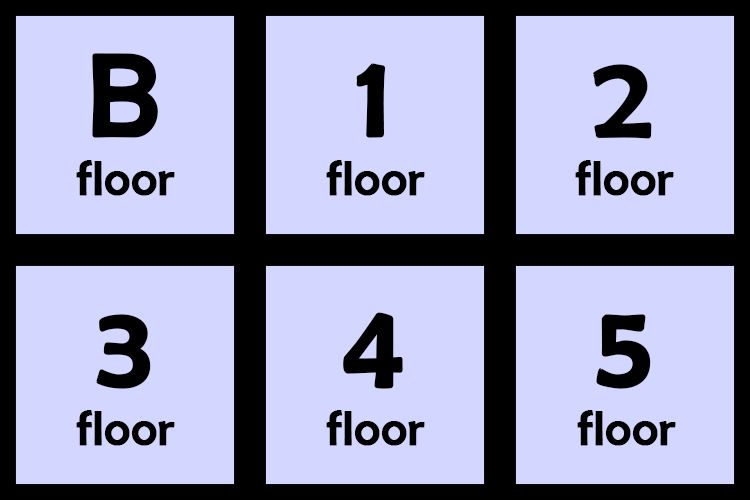
<style>
.page{position:relative;width:750px;height:500px;background:#d3d6ff}
.page>*{position:absolute;margin:0}
.t1{font:118px "BerlinSansFB-Reg";color:#000000;font-weight:bold}
.t2{font:49px "BerlinSansFB-Reg";color:#000000;font-weight:bold}
</style>
<div class="page">
<p class="t1" style="left:92px;top:53px;width:66px;height:85px">B</p>
<p class="t1" style="left:356px;top:63px;width:30px;height:75px">1</p>
<p class="t1" style="left:593px;top:64px;width:59px;height:75px">2</p>
<p class="t2" style="left:76px;top:160px;width:99px;height:36px">floor</p>
<p class="t2" style="left:326px;top:160px;width:99px;height:36px">floor</p>
<p class="t2" style="left:575px;top:160px;width:99px;height:36px">floor</p>
<p class="t1" style="left:96px;top:314px;width:55px;height:75px">3</p>
<p class="t1" style="left:343px;top:312px;width:60px;height:77px">4</p>
<p class="t1" style="left:596px;top:314px;width:55px;height:75px">5</p>
<p class="t2" style="left:76px;top:410px;width:99px;height:36px">floor</p>
<p class="t2" style="left:326px;top:410px;width:99px;height:36px">floor</p>
<p class="t2" style="left:577px;top:410px;width:99px;height:36px">floor</p>
</div>
